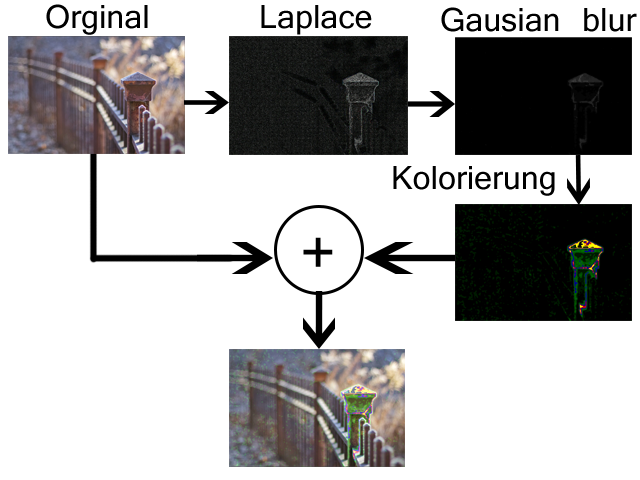
<style>
.page{position:relative;width:640px;height:480px;background:#ffffff}
.page>*{position:absolute;margin:0}
.t1{font:36px "Vrinda";color:#000000}
.t2{font:72px "Vrinda";color:#000000}
</style>
<div class="page">
<p class="t1" style="left:46px;top:4px;width:102px;height:31px">Orginal</p>
<p class="t1" style="left:261px;top:5px;width:111px;height:30px">Laplace</p>
<p class="t1" style="left:441px;top:7px;width:196px;height:25px">Gausian blur</p>
<p class="t1" style="left:393px;top:166px;width:162px;height:30px">Kolorierung</p>
<p class="t2" style="left:303px;top:237px;width:30px;height:30px"><span class="t1"> </span>+</p>
</div>
